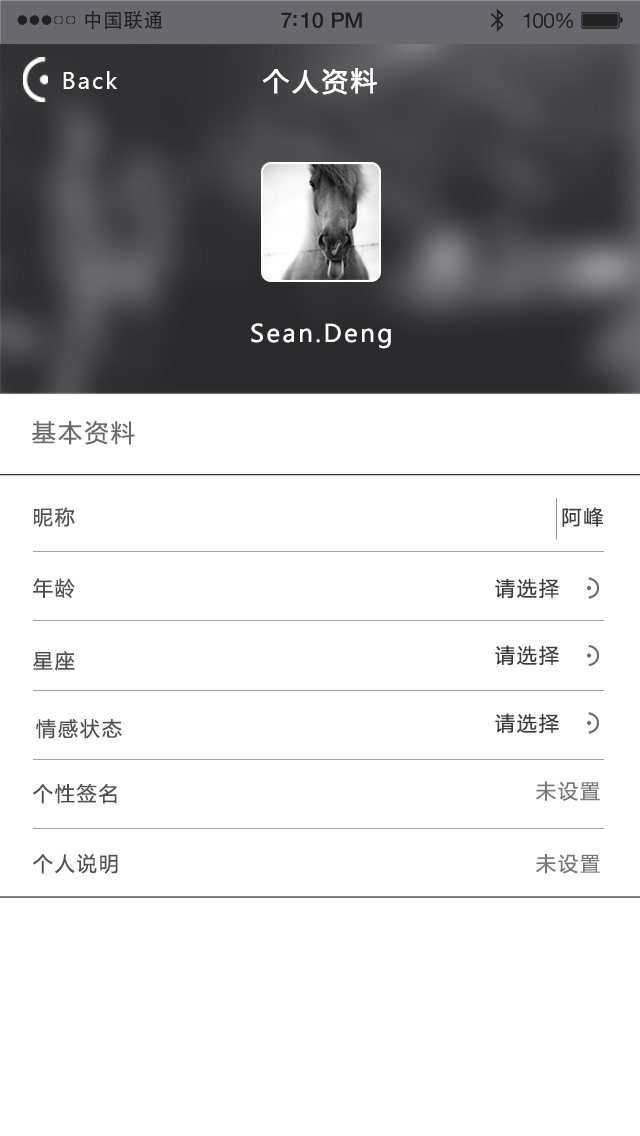
<style>
.page{position:relative;width:640px;height:1136px;background:#ffffff}
.page>*{position:absolute;margin:0}
.t1{font:19.7px "AdobeHeitiStd-Regular";letter-spacing:0.02em;color:#212121}
.t2{font:21.4px "HelveticaNeue-Medium";letter-spacing:-0.02em;color:#212121}
.t3{font:20.6px "HelveticaNeue";letter-spacing:-0.02em;color:#212121}
.t4{font:22px "MicrosoftYaHei";letter-spacing:0.1em;color:#ffffff}
.t5{font:26px "MicrosoftYaHei";letter-spacing:0.1em;color:#ffffff;font-weight:bold}
.t6{font:24px "MicrosoftYaHei";letter-spacing:0.1em;color:#ffffff}
.t7{font:24px "MicrosoftYaHei";letter-spacing:0.1em;color:#68686e}
.t8{font:20px "MicrosoftYaHei";letter-spacing:0.1em;color:#505050}
.t9{font:20px "MicrosoftYaHei";letter-spacing:0.1em;color:#3c3c3c}
.t10{font:20px "MicrosoftYaHei";letter-spacing:0.1em;color:#787878}
</style>
<div class="page">
<p class="t1" style="left:85px;top:10px;width:78px;height:20px">中国联通</p>
<p class="t2" style="left:281px;top:12px;width:81px;height:16px">7:10 PM</p>
<p class="t3" style="left:523px;top:13px;width:50px;height:16px">100%</p>
<p class="t4" style="left:63px;top:71px;width:55px;height:18px">Back</p>
<p class="t5" style="left:262px;top:68px;width:115px;height:27px">个人资料</p>
<p class="t6" style="left:251px;top:323px;width:140px;height:26px">Sean.Deng</p>
<p class="t7" style="left:32px;top:420px;width:103px;height:25px">基本资料</p>
<p class="t8" style="left:34px;top:507px;width:41px;height:20px">昵称</p>
<p class="t9" style="left:562px;top:507px;width:42px;height:20px">阿峰</p>
<p class="t8" style="left:33px;top:578px;width:42px;height:20px">年龄</p>
<p class="t9" style="left:495px;top:578px;width:64px;height:21px">请选择</p>
<p class="t8" style="left:33px;top:651px;width:42px;height:20px">星座</p>
<p class="t9" style="left:495px;top:645px;width:64px;height:20px">请选择</p>
<p class="t9" style="left:495px;top:713px;width:64px;height:20px">请选择</p>
<p class="t8" style="left:36px;top:719px;width:86px;height:20px">情感状态</p>
<p class="t8" style="left:33px;top:783px;width:84px;height:21px">个性签名</p>
<p class="t10" style="left:536px;top:781px;width:64px;height:20px">未设置</p>
<p class="t8" style="left:33px;top:854px;width:85px;height:20px">个人说明</p>
<p class="t10" style="left:536px;top:854px;width:64px;height:20px">未设置</p>
</div>
